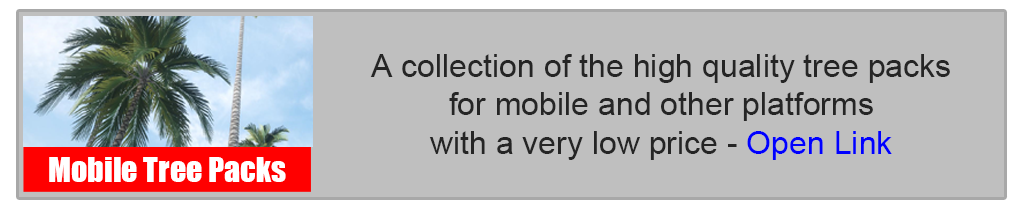
<style>
.page{position:relative;width:1024px;height:210px;background:#bfbfbf}
.page>*{position:absolute;margin:0}
.t1{font:32px "ArialMT";color:#252525}
.t2{font:32px "ArialMT";color:#0000ff}
.t3{font:32px "Impact";color:#ffffff}
</style>
<div class="page">
<p class="t1" style="left:370px;top:54px;width:580px;height:106px;text-align:center">A collection of the high quality tree packs<br>for mobile and other platforms<br>with a very low price - <span class="t2">Open Link</span></p>
<p class="t3" style="left:49px;top:157px;width:237px;height:25px">Mobile Tree Packs</p>
</div>
